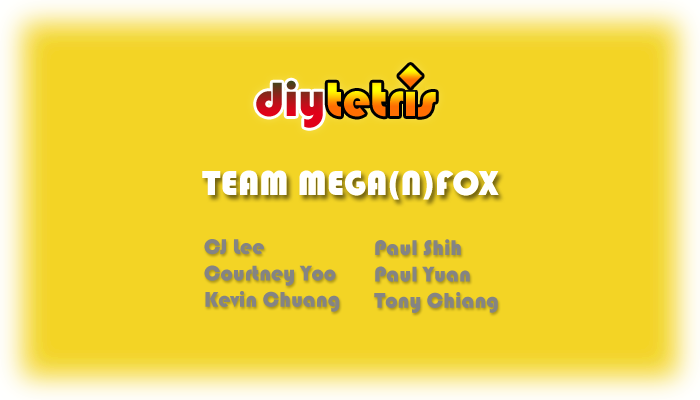
<style>
.page{position:relative;width:700px;height:400px;background:#f3d425}
.page>*{position:absolute;margin:0}
.t1{font:36px "Bauhaus93";color:#ffffff}
.t2{font:22px "Bauhaus93";color:#848484}
</style>
<div class="page">
<p class="t1" style="left:202px;top:170px;width:297px;height:30px">TEAM MEGA(N)FOX</p>
<p class="t1" style="left:202px;top:170px;width:297px;height:30px">TEAM MEGA(N)FOX</p>
<p class="t2" style="left:204px;top:239px;width:136px;height:73px">CJ Lee<br>Courtney Yoo<br>Kevin Chuang</p>
<p class="t2" style="left:374px;top:239px;width:124px;height:74px">Paul Shih<br>Paul Yuan<br>Tony Chiang</p>
</div>
